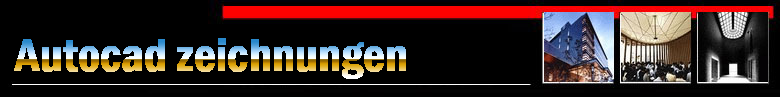
<style>
.page{position:relative;width:780px;height:97px;background:#000000}
.page>*{position:absolute;margin:0}
.t1{font:48.3px "FranklinGothic-DemiCond"}
</style>
<div class="page">
<p class="t1" style="left:14px;top:38px;width:392px;height:41px">Autocad zeichnungen</p>
</div>
